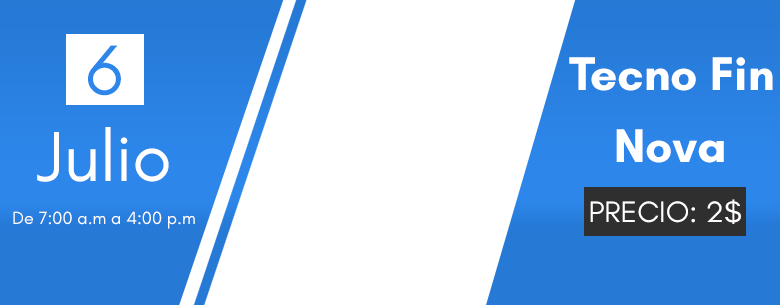
<style>
.page{position:relative;width:780px;height:305px;background:#ffffff}
.page>*{position:absolute;margin:0}
.t1{font:72px "GlacialIndifference-Regular";color:#ffffff}
.t2{font:72px "GlacialIndifference-Regular";color:#2d87eb}
.t3{font:48px "GlacialIndifference-Bold";color:#ffffff}
.t4{font:30px "GlacialIndifference-Regular";color:#ffffff}
.t5{font:18px "GlacialIndifference-Regular";color:#ffffff}
</style>
<div class="page">
<p class="t1" style="left:37px;top:45px;width:132px;height:137px;text-align:center"><span class="t2">6<br></span>Julio</p>
<p class="t3" style="left:569px;top:57px;width:204px;height:106px;text-align:center">Tecno Fin<br> Nova</p>
<p class="t4" style="left:590px;top:199px;width:151px;height:25px">PRECIO: 2$</p>
<p class="t5" style="left:13px;top:211px;width:182px;height:18px">De 7:00 a.m a 4:00 p.m</p>
</div>
